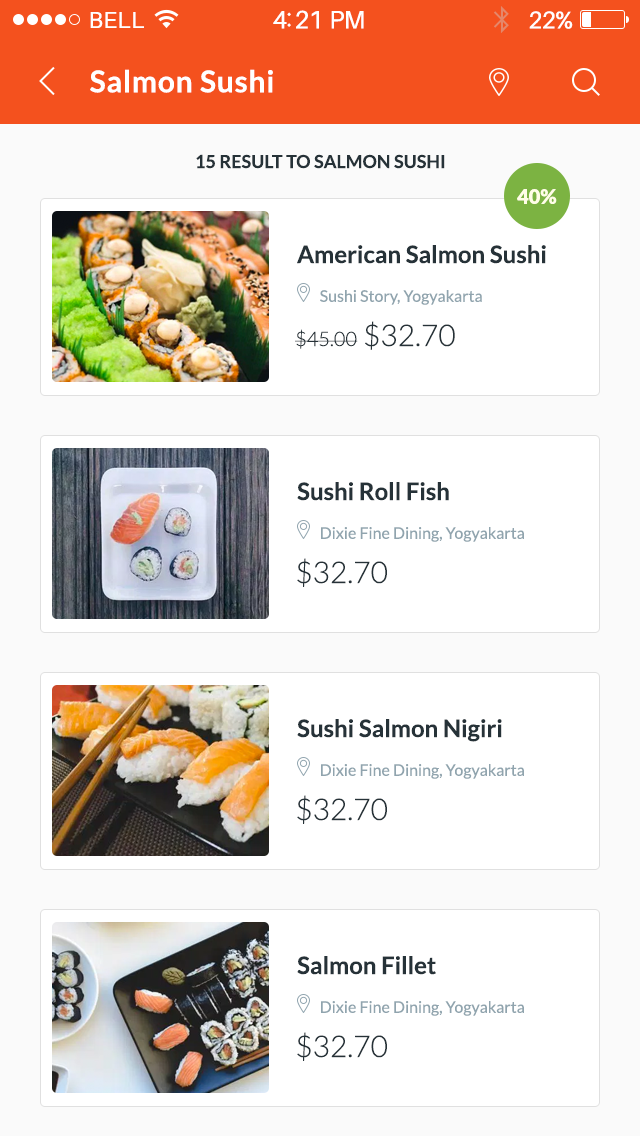
<style>
.page{position:relative;width:640px;height:1136px;background:#ffffff}
.page>*{position:absolute;margin:0}
.t1{font:23px "Aileron-Regular";letter-spacing:0.02em;color:#ffffff}
.t2{font:25px "Aileron-Regular";letter-spacing:-0.02em;color:#ffffff}
.t3{font:24px "Aileron-Regular";letter-spacing:-0.02em;color:#ffffff}
.t4{font:30px "Lato-Bold";letter-spacing:0.025em;color:#ffffff}
.t5{font:18px "Lato-Bold";color:#263238;text-transform:uppercase}
.t6{font:20px "Lato-Black";color:#fffde7}
.t7{font:24px "Lato-Bold";color:#263238}
.t8{font:16px "Lato-Regular";color:#90a4ae}
.t9{font:20px "Lato-Light";color:#263238}
.t10{font:30px "Lato-Light";color:#263238}
</style>
<div class="page">
<p class="t1" style="left:90px;top:12px;width:54px;height:16px">BELL</p>
<p class="t2" style="left:273px;top:10px;width:91px;height:19px">4:21 PM</p>
<p class="t3" style="left:529px;top:11px;width:44px;height:18px">22%</p>
<p class="t4" style="left:90px;top:69px;width:183px;height:24px">Salmon Sushi</p>
<p class="t5" style="left:196px;top:154px;width:249px;height:15px">15 Result to Salmon Sushi</p>
<p class="t6" style="left:517px;top:189px;width:40px;height:15px">40%</p>
<p class="t7" style="left:297px;top:245px;width:249px;height:19px">American Salmon Sushi</p>
<p class="t8" style="left:320px;top:290px;width:162px;height:15px">Sushi Story, Yogyakarta</p>
<p class="t9" style="left:295px;top:321px;width:160px;height:29px">$45.00 <span class="t10">$32.70</span></p>
<p class="t7" style="left:297px;top:482px;width:152px;height:19px">Sushi Roll Fish</p>
<p class="t8" style="left:321px;top:527px;width:203px;height:15px">Dixie Fine Dining, Yogyakarta</p>
<p class="t10" style="left:297px;top:558px;width:90px;height:29px">$32.70</p>
<p class="t7" style="left:297px;top:719px;width:205px;height:23px">Sushi Salmon Nigiri</p>
<p class="t8" style="left:321px;top:764px;width:203px;height:15px">Dixie Fine Dining, Yogyakarta</p>
<p class="t10" style="left:297px;top:795px;width:90px;height:29px">$32.70</p>
<p class="t7" style="left:297px;top:956px;width:139px;height:19px">Salmon Fillet</p>
<p class="t8" style="left:321px;top:1001px;width:203px;height:15px">Dixie Fine Dining, Yogyakarta</p>
<p class="t10" style="left:297px;top:1032px;width:90px;height:29px">$32.70</p>
</div>
